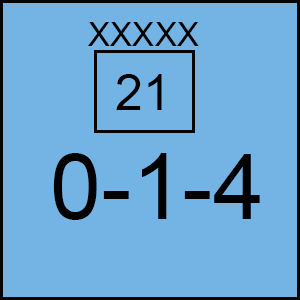
<style>
.page{position:relative;width:300px;height:300px;background:#74b4e4}
.page>*{position:absolute;margin:0}
.t1{font:33.3px "ArialMT";color:#000000}
.t2{font:50px "ArialMT";color:#000000}
.t3{font:91.7px "ArialMT";color:#000000}
</style>
<div class="page">
<p class="t1" style="left:88px;top:22px;width:111px;height:24px">XXXXX</p>
<p class="t2" style="left:116px;top:74px;width:46px;height:36px">21</p>
<p class="t3" style="left:53px;top:153px;width:207px;height:67px">0-1-4</p>
</div>
